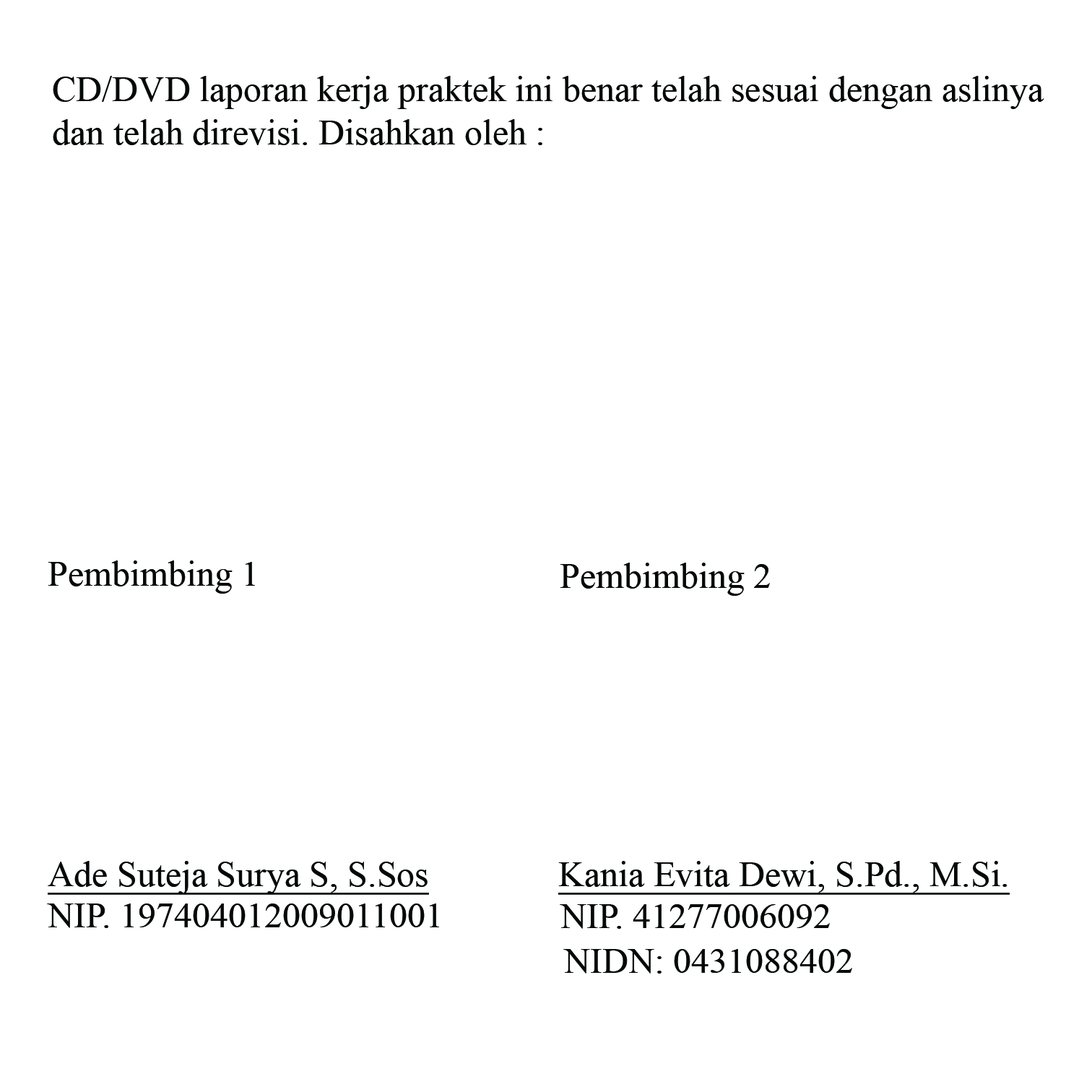
<style>
.page{position:relative;width:1092px;height:1092px;background:#ffffff}
.page>*{position:absolute;margin:0}
.t1{font:36.1px "TimesNewRomanPSMT";color:#060808}
.t2{font:36.1px "TimesNewRomanPSMT";color:#060808;text-decoration:underline}
</style>
<div class="page">
<p class="t1" style="left:53px;top:76px;width:991px;height:69px">CD/DVD laporan kerja praktek ini benar telah sesuai dengan aslinya<br>dan telah direvisi. Disahkan oleh :</p>
<p class="t1" style="left:48px;top:560px;width:207px;height:34px">Pembimbing 1</p>
<p class="t1" style="left:560px;top:563px;width:210px;height:33px">Pembimbing 2</p>
<p class="t2" style="left:48px;top:861px;width:381px;height:34px">Ade Suteja Surya S, S.Sos</p>
<p class="t2" style="left:558px;top:861px;width:452px;height:34px">Kania Evita Dewi, S.Pd., M.Si.</p>
<p class="t1" style="left:47px;top:903px;width:392px;height:25px">NIP. 197404012009011001</p>
<p class="t1" style="left:560px;top:904px;width:270px;height:25px">NIP. 41277006092</p>
<p class="t1" style="left:563px;top:949px;width:289px;height:25px">NIDN: 0431088402</p>
</div>
